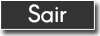
<style>
.page{position:relative;width:100px;height:36px;background:#333333}
.page>*{position:absolute;margin:0}
.t1{font:24px "Arcon-Regular";color:#ffffff}
</style>
<div class="page">
<p class="t1" style="left:28px;top:4px;width:39px;height:19px">Sair</p>
</div>
